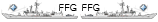
<style>
.page{position:relative;width:158px;height:22px;background:#ffffff}
.page>*{position:absolute;margin:0}
.t1{font:9.3px "Gulim";color:#000000}
</style>
<div class="page">
<p class="t1" style="left:59px;top:4px;width:18px;height:7px">FFG</p>
<p class="t1" style="left:82px;top:4px;width:18px;height:7px">FFG</p>
</div>
